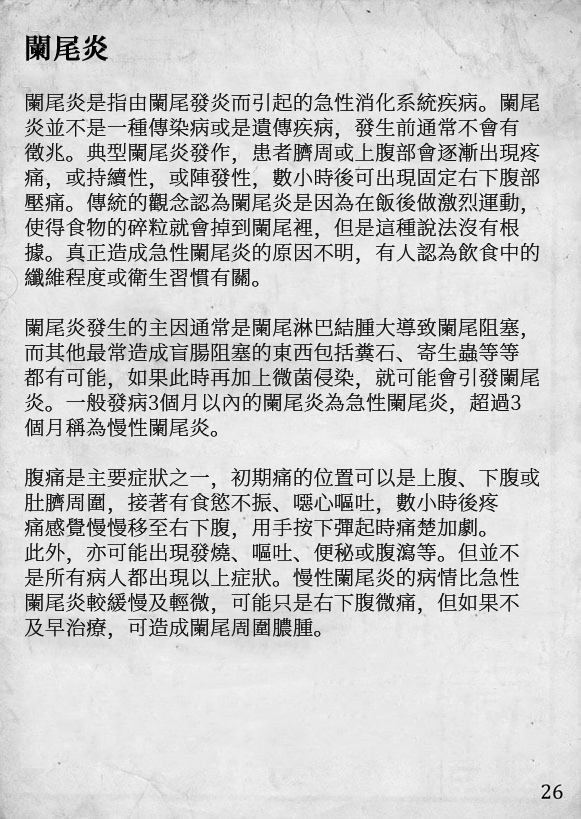
<style>
.page{position:relative;width:581px;height:819px}
.page>*{position:absolute;margin:0}
.t1{font:20.2px/25px "SourceHanSerifCN-ExtraLight";letter-spacing:0.02em;color:#111111}
.t2{font:27.2px/29px "SourceHanSerifCN-SemiBold";letter-spacing:0.02em;color:#000000;font-weight:bold}
</style>
<div class="page">
<p class="t1" style="left:24px;top:35px;width:516px;height:604px"><span class="t2">闌尾炎<br><br></span>闌尾炎是指由闌尾發炎而引起的急性消化系統疾病。闌尾<br>炎並不是一種傳染病或是遺傳疾病，發生前通常不會有<br>徵兆。典型闌尾炎發作，患者臍周或上腹部會逐漸出現疼<br>痛，或持續性，或陣發性，數小時後可出現固定右下腹部<br>壓痛。傳統的觀念認為闌尾炎是因為在飯後做激烈運動，<br>使得食物的碎粒就會掉到闌尾裡，但是這種說法沒有根<br>據。真正造成急性闌尾炎的原因不明，有人認為飲食中的<br>纖維程度或衛生習慣有關。<br><br>闌尾炎發生的主因通常是闌尾淋巴結腫大導致闌尾阻塞，<br>而其他最常造成盲腸阻塞的東西包括糞石、寄生蟲等等<br>都有可能，如果此時再加上微菌侵染，就可能會引發闌尾<br>炎。一般發病3個月以內的闌尾炎為急性闌尾炎，超過3<br>個月稱為慢性闌尾炎。<br><br>腹痛是主要症狀之一，初期痛的位置可以是上腹、下腹或<br>肚臍周圍，接著有食慾不振、噁心嘔吐，數小時後疼<br>痛感覺慢慢移至右下腹，用手按下彈起時痛楚加劇。<br>此外，亦可能出現發燒、嘔吐、便秘或腹瀉等。但並不<br>是所有病人都出現以上症狀。慢性闌尾炎的病情比急性<br>闌尾炎較緩慢及輕微，可能只是右下腹微痛，但如果不<br>及早治療，可造成闌尾周圍膿腫。</p>
</div>
